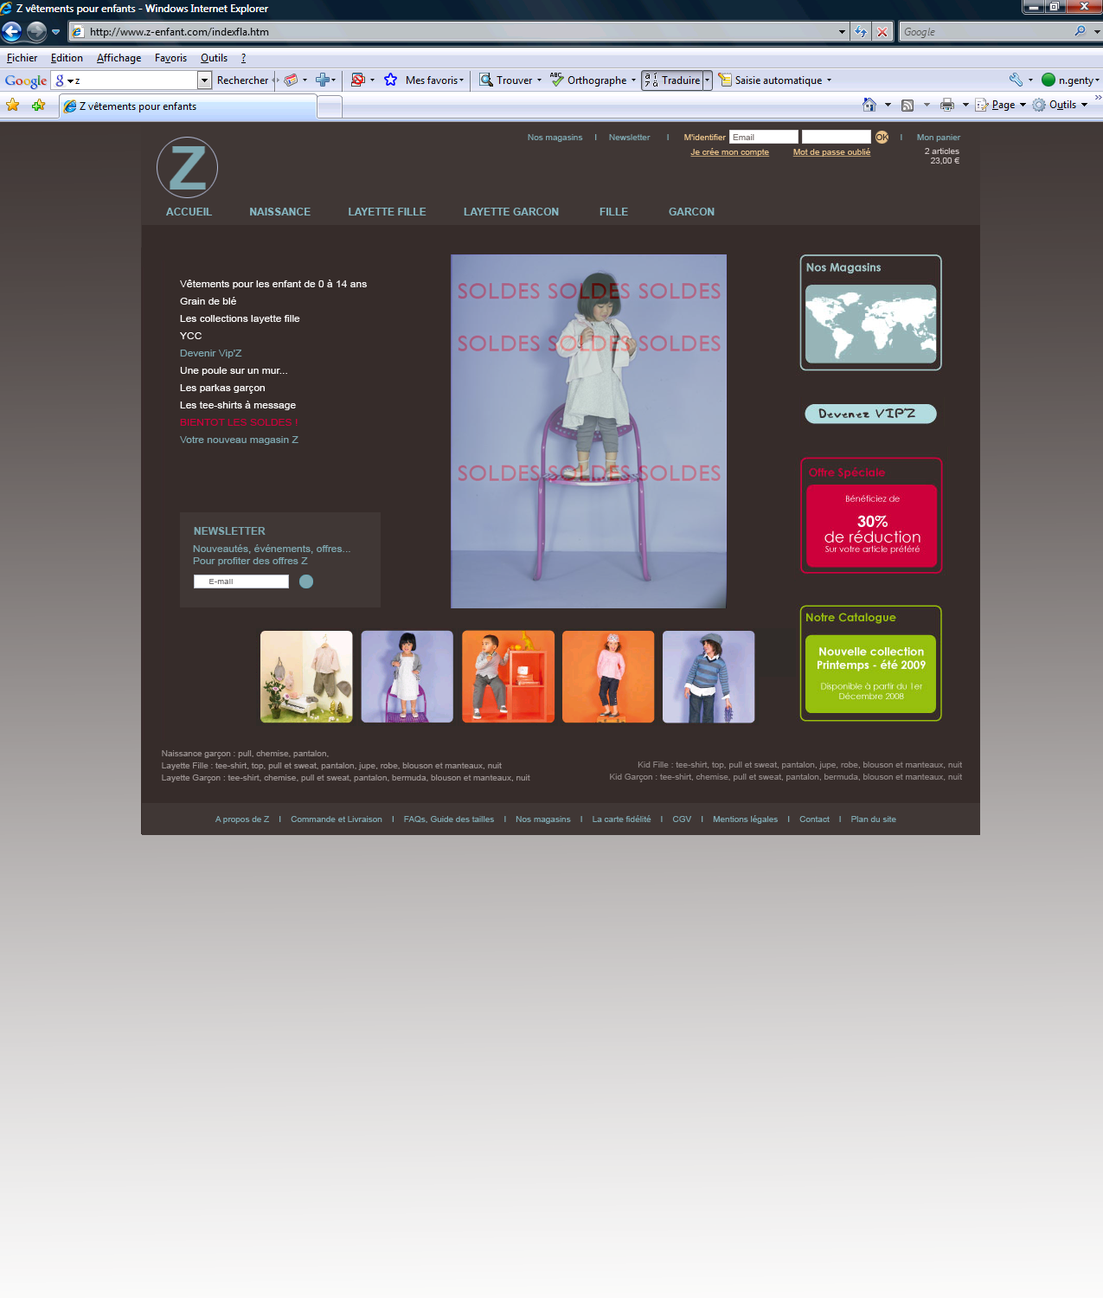
<style>
.page{position:relative;width:1103px;height:1298px}
.page>*{position:absolute;margin:0}
.t1{font:8.7px "ArialMT";color:#7ea8b1}
.t2{font:61.5px "Arial-BoldMT";color:#7ea8b1}
.t3{font:10.4px "Arial-BoldMT";color:#87b9c4}
.t4{font:10.4px "Arial-BoldMT";color:#ffffff}
.t5{font:9.3px/17.3px "ArialMT";color:#ffffff;scale:1.11 1}
.t6{font:9.3px/17.3px "ArialMT";color:#7ea8b1;scale:1.11 1}
.t7{font:9.3px/17.3px "ArialMT";color:#cd003b;scale:1.11 1}
.t8{font:10.4px "Arial-BoldMT";color:#7ea8b1}
.t9{font:9.3px/12.1px "ArialMT";color:#7ea8b1;scale:1.11 1}
.t10{font:7px "ArialMT";letter-spacing:0.05em;color:#737173;scale:1.11 1}
.t11{font:7.8px/12.1px "ArialMT";color:#98908f;scale:1.11 1}
.t12{font:7.8px/12.1px "ArialMT";color:#8b8382;scale:1.11 1}
.t13{font:7.8px "ArialMT";color:#7ea8b1;scale:1.11 1}
</style>
<div class="page">
<p class="t1" style="left:528px;top:134px;width:141px;height:8px">Nos magasins     I     Newsletter       I</p>
<p class="t2" style="left:170px;top:146px;width:36px;height:44px">Z</p>
<p class="t3" style="left:166px;top:208px;width:549px;height:7px"><span class="t4"><br></span>ACCUEIL             NAISSANCE             LAYETTE FILLE             LAYETTE GARCON              FILLE              GARCON</p>
<p class="t5" style="left:180px;top:280px;width:187px;height:165px">Vêtements pour les enfant de 0 à 14 ans<br>Grain de blé<br>Les collections layette fille<br>YCC<br><span class="t6">Devenir Vip'Z<br></span>Une poule sur un mur...<br>Les parkas garçon<br>Les tee-shirts à message<br><span class="t7">BIENTOT LES SOLDES !<br></span><span class="t6">Votre nouveau magasin Z</span></p>
<p class="t8" style="left:194px;top:527px;width:72px;height:8px">NEWSLETTER</p>
<p class="t9" style="left:193px;top:544px;width:157px;height:22px">Nouveautés, événements, offres...<br>Pour profiter des offres Z</p>
<p class="t10" style="left:209px;top:579px;width:24px;height:5px">E-mail</p>
<p class="t11" style="left:162px;top:750px;width:368px;height:33px">Naissance garçon : pull, chemise, pantalon, <br>Layette Fille : tee-shirt, top, pull et sweat, pantalon, jupe, robe, blouson et manteaux, nuit<br>Layette Garçon : tee-shirt, chemise, pull et sweat, pantalon, bermuda, blouson et manteaux, nuit</p>
<p class="t12" style="left:610px;top:762px;width:352px;height:20px;text-align:right">Kid Fille : tee-shirt, top, pull et sweat, pantalon, jupe, robe, blouson et manteaux, nuit<br>Kid Garçon : tee-shirt, chemise, pull et sweat, pantalon, bermuda, blouson et manteaux, nuit</p>
<p class="t13" style="left:215px;top:815px;width:682px;height:9px">A propos de Z    I    Commande et Livraison    I    FAQs, Guide des tailles    I    Nos magasins    I    La carte fidélité    I    CGV    I    Mentions légales    I    Contact    I    Plan du site</p>
</div>
